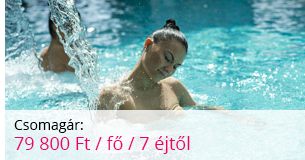
<style>
.page{position:relative;width:305px;height:160px}
.page>*{position:absolute;margin:0}
.t1{font:18px/20px "OpenSans";color:#ec006e}
.t2{font:14px/20px "OpenSans";color:#000000}
</style>
<div class="page">
<p class="t1" style="left:14px;top:119px;width:176px;height:35px"><span class="t2">Csomagár: <br></span>79 800 Ft / fő / 7 éjtől</p>
</div>
